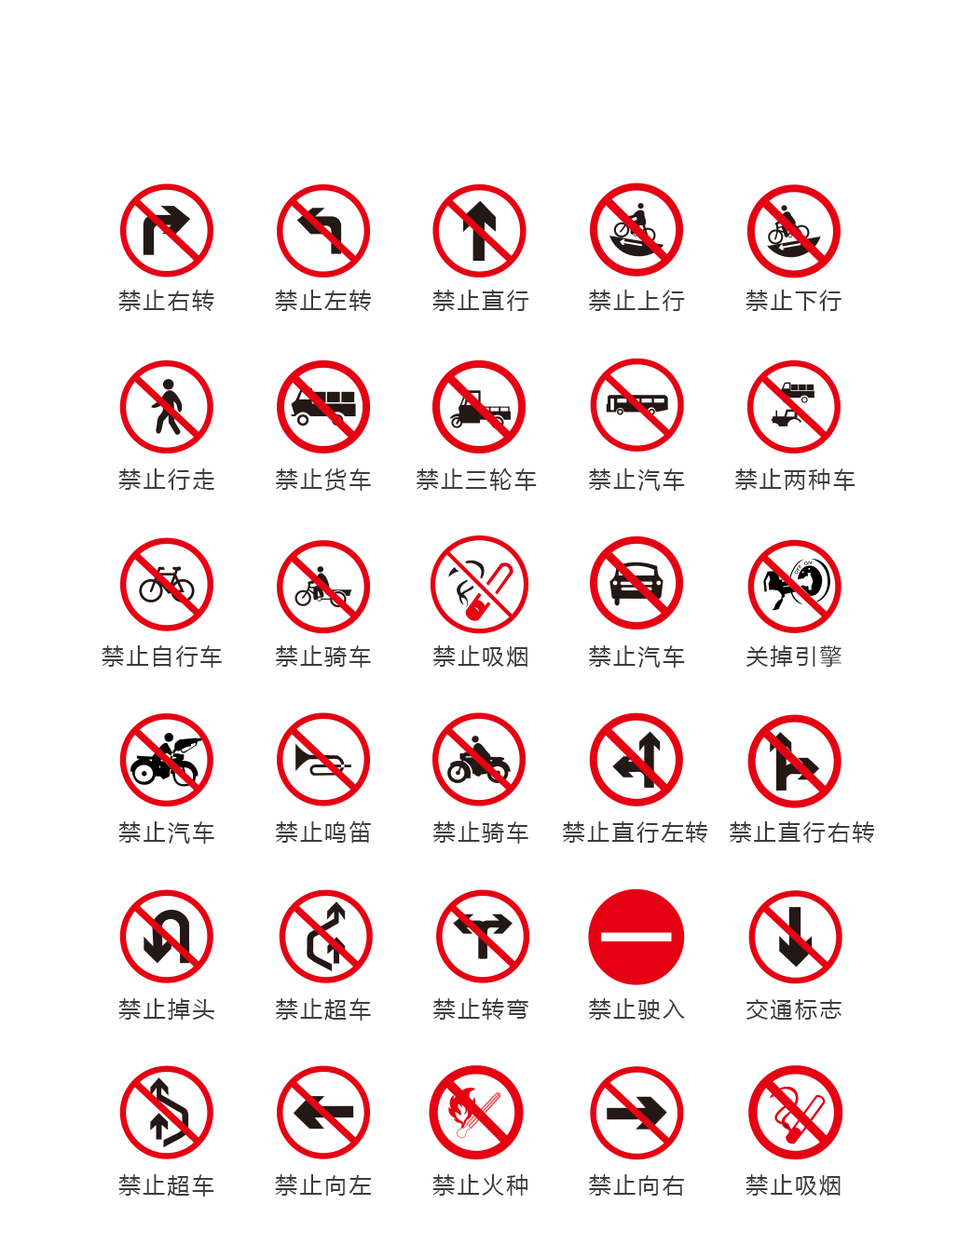
<style>
.page{position:relative;width:958px;height:1245px;background:#ffffff}
.page>*{position:absolute;margin:0}
.t1{font:22.4px "MicrosoftYaHei";letter-spacing:0.1em;color:#3d3d3d}
</style>
<div class="page">
<p class="t1" style="left:118px;top:290px;width:96px;height:21px">禁止右转</p>
<p class="t1" style="left:275px;top:290px;width:97px;height:21px">禁止左转</p>
<p class="t1" style="left:432px;top:290px;width:97px;height:21px">禁止直行</p>
<p class="t1" style="left:588px;top:290px;width:97px;height:21px">禁止上行</p>
<p class="t1" style="left:745px;top:290px;width:96px;height:21px">禁止下行</p>
<p class="t1" style="left:118px;top:469px;width:96px;height:21px">禁止行走</p>
<p class="t1" style="left:275px;top:469px;width:96px;height:22px">禁止货车</p>
<p class="t1" style="left:415px;top:469px;width:122px;height:22px">禁止三轮车</p>
<p class="t1" style="left:588px;top:469px;width:97px;height:22px">禁止汽车</p>
<p class="t1" style="left:734px;top:469px;width:121px;height:22px">禁止两种车</p>
<p class="t1" style="left:102px;top:645px;width:120px;height:23px">禁止自行车</p>
<p class="t1" style="left:275px;top:645px;width:96px;height:23px">禁止骑车</p>
<p class="t1" style="left:432px;top:645px;width:95px;height:22px">禁止吸烟</p>
<p class="t1" style="left:588px;top:645px;width:97px;height:23px">禁止汽车</p>
<p class="t1" style="left:746px;top:645px;width:95px;height:22px">关掉引擎</p>
<p class="t1" style="left:118px;top:822px;width:96px;height:22px">禁止汽车</p>
<p class="t1" style="left:275px;top:822px;width:96px;height:21px">禁止鸣笛</p>
<p class="t1" style="left:432px;top:822px;width:96px;height:22px">禁止骑车</p>
<p class="t1" style="left:562px;top:822px;width:146px;height:21px">禁止直行左转</p>
<p class="t1" style="left:728px;top:822px;width:147px;height:21px">禁止直行右转</p>
<p class="t1" style="left:118px;top:999px;width:96px;height:21px">禁止掉头</p>
<p class="t1" style="left:275px;top:999px;width:96px;height:22px">禁止超车</p>
<p class="t1" style="left:432px;top:999px;width:96px;height:21px">禁止转弯</p>
<p class="t1" style="left:588px;top:999px;width:97px;height:21px">禁止驶入</p>
<p class="t1" style="left:746px;top:999px;width:95px;height:21px">交通标志</p>
<p class="t1" style="left:118px;top:1175px;width:96px;height:22px">禁止超车</p>
<p class="t1" style="left:275px;top:1175px;width:96px;height:21px">禁止向左</p>
<p class="t1" style="left:432px;top:1175px;width:95px;height:21px">禁止火种</p>
<p class="t1" style="left:588px;top:1175px;width:96px;height:21px">禁止向右</p>
<p class="t1" style="left:745px;top:1175px;width:95px;height:21px">禁止吸烟</p>
</div>
